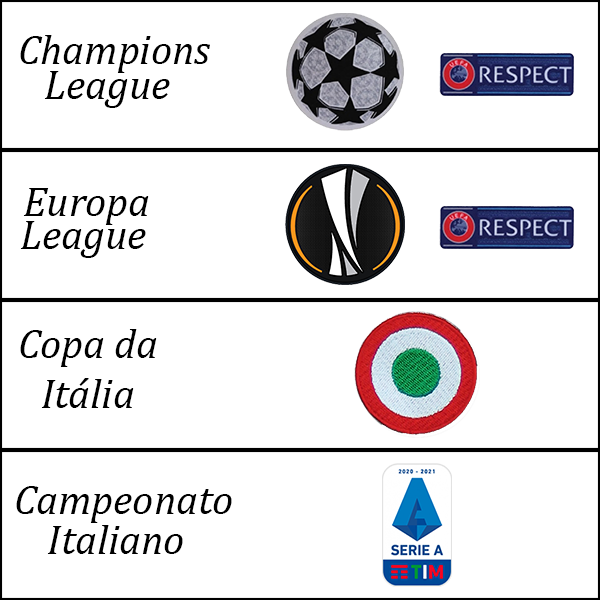
<style>
.page{position:relative;width:600px;height:600px;background:#ffffff}
.page>*{position:absolute;margin:0}
.t1{font:41.7px "Cambria-Italic";color:#000000}
</style>
<div class="page">
<p class="t1" style="left:20px;top:35px;width:190px;height:38px">Champions</p>
<p class="t1" style="left:44px;top:71px;width:126px;height:37px">League</p>
<p class="t1" style="left:23px;top:188px;width:126px;height:37px">Europa</p>
<p class="t1" style="left:20px;top:221px;width:126px;height:37px">League</p>
<p class="t1" style="left:20px;top:329px;width:137px;height:79px;text-align:center">Copa da<br>Itália</p>
<p class="t1" style="left:16px;top:486px;width:216px;height:37px">Campeonato</p>
<p class="t1" style="left:47px;top:525px;width:136px;height:29px">Italiano</p>
</div>
